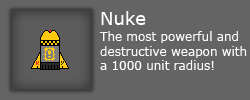
<style>
.page{position:relative;width:250px;height:100px;background:#646464}
.page>*{position:absolute;margin:0}
.t1{font:18px "Verdana";color:#ffffff}
.t2{font:12px "Verdana";color:#ffffff}
</style>
<div class="page">
<p class="t1" style="left:101px;top:11px;width:45px;height:14px">Nuke</p>
<p class="t2" style="left:99px;top:31px;width:148px;height:39px">The most powerful and destructive weapon with a 1000 unit radius!</p>
</div>
